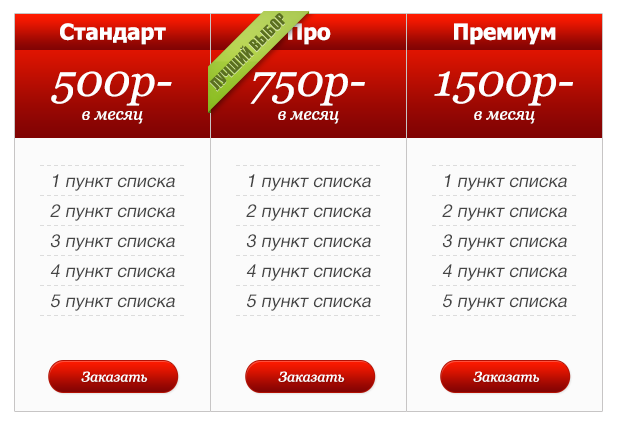
<style>
.page{position:relative;width:618px;height:426px;background:#fbfbfb}
.page>*{position:absolute;margin:0}
.t1{font:15px "Impact";color:#5b7020;text-transform:uppercase}
.t2{font:22px "Tahoma-Bold";color:#ffffff}
.t3{font:44.6px "Georgia-Italic";color:#ffffff}
.t4{font:17.3px "Georgia-Italic";color:#ffffff}
.t5{font:18px/30px "Helvetica-5-Normal";color:#444444;font-style:italic}
.t6{font:14px "Georgia-Italic";color:#ffffff}
</style>
<div class="page">
<p class="t1" style="left:209px;top:13px;width:76px;height:78px;rotate:-45deg">лучший выбор</p>
<p class="t2" style="left:60px;top:23px;width:106px;height:22px">Стандарт</p>
<p class="t2" style="left:288px;top:23px;width:43px;height:22px">Про</p>
<p class="t2" style="left:454px;top:23px;width:102px;height:22px">Премиум</p>
<p class="t3" style="left:51px;top:71px;width:121px;height:35px">500р-</p>
<p class="t3" style="left:250px;top:71px;width:115px;height:35px">750р-</p>
<p class="t3" style="left:434px;top:71px;width:139px;height:35px">1500р-</p>
<p class="t4" style="left:82px;top:111px;width:61px;height:13px">в месяц</p>
<p class="t4" style="left:278px;top:111px;width:61px;height:13px">в месяц</p>
<p class="t4" style="left:474px;top:111px;width:61px;height:13px">в месяц</p>
<p class="t5" style="left:50px;top:174px;width:125px;height:137px;text-align:center">1 пункт списка<br>2 пункт списка<br>3 пункт списка<br>4 пункт списка<br>5 пункт списка</p>
<p class="t5" style="left:246px;top:174px;width:125px;height:137px;text-align:center">1 пункт списка<br>2 пункт списка<br>3 пункт списка<br>4 пункт списка<br>5 пункт списка</p>
<p class="t5" style="left:442px;top:174px;width:125px;height:137px;text-align:center">1 пункт списка<br>2 пункт списка<br>3 пункт списка<br>4 пункт списка<br>5 пункт списка</p>
<p class="t6" style="left:81px;top:371px;width:67px;height:11px">Заказать</p>
<p class="t6" style="left:278px;top:371px;width:67px;height:11px">Заказать</p>
<p class="t6" style="left:473px;top:371px;width:67px;height:11px">Заказать</p>
</div>
